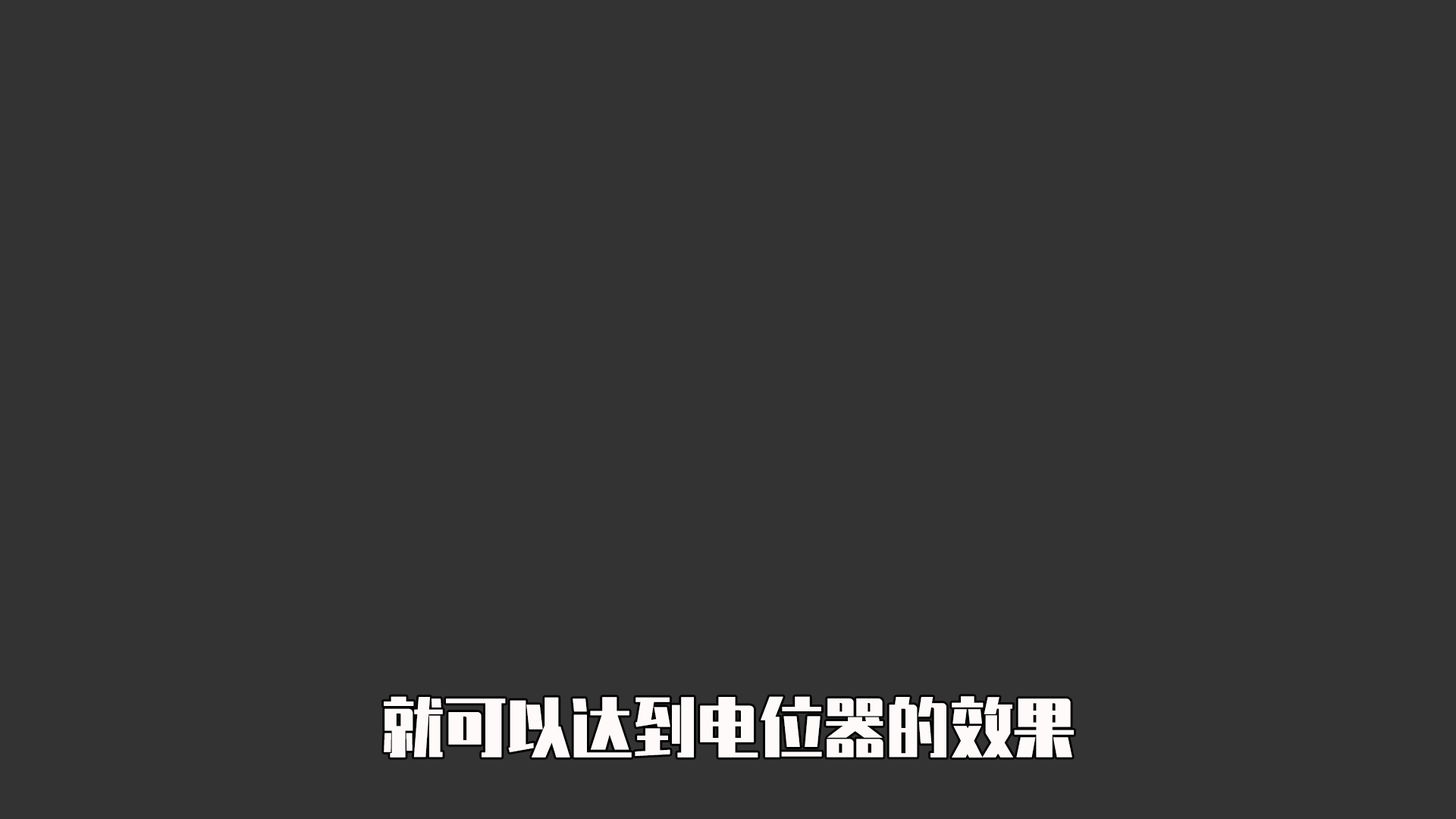
<style>
.page{position:relative;width:1456px;height:819px;background:#333333}
.page>*{position:absolute;margin:0}
.t1{font:63.2px "ZhenyanGB-Regular";color:#fefafa}
</style>
<div class="page">
<p class="t1" style="left:384px;top:696px;width:690px;height:62px">就可以达到电位器的效果</p>
</div>
